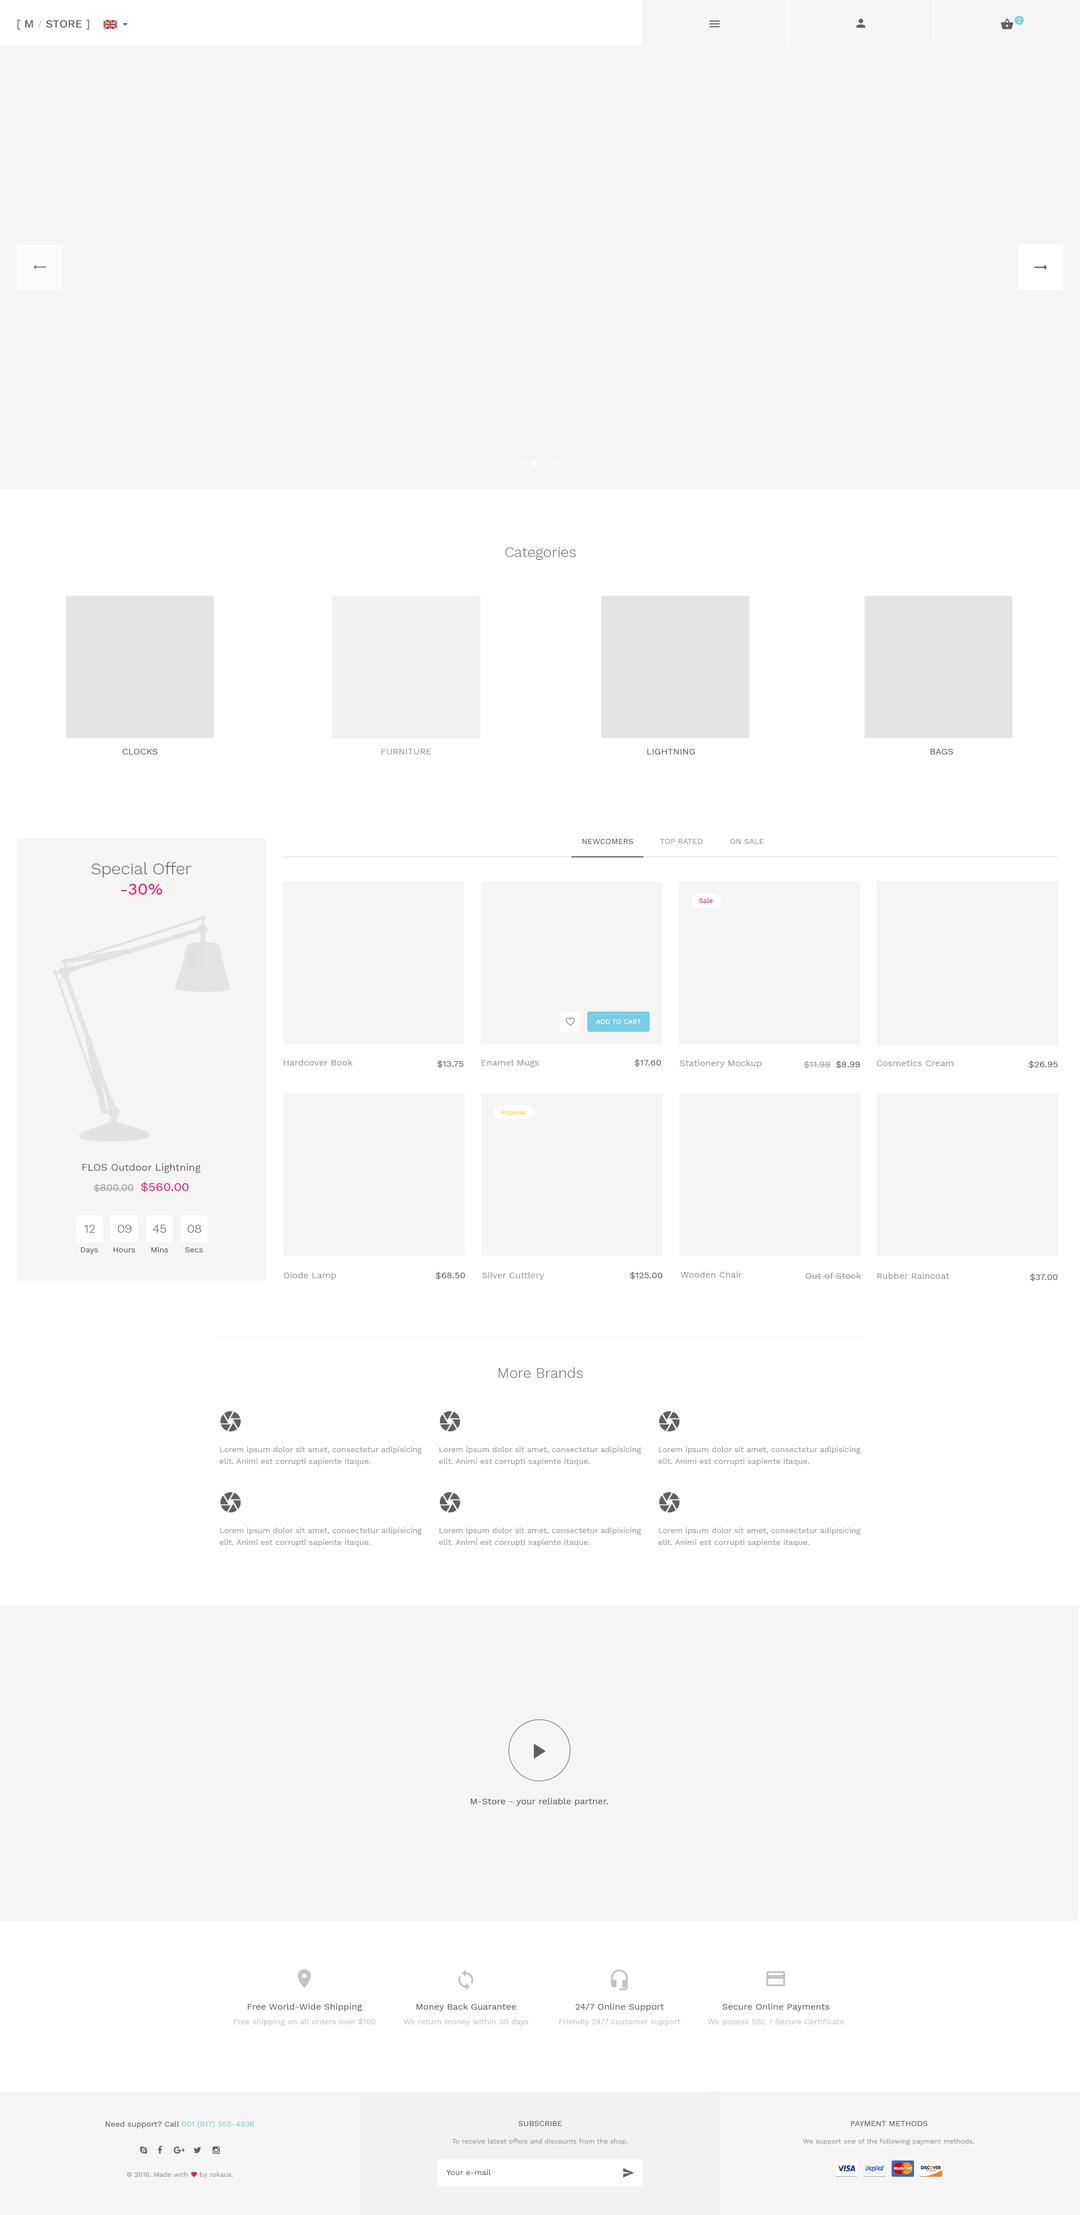
<style>
.page{position:relative;width:1080px;height:2215px;background:#f5f5f5}
.page>*{position:absolute;margin:0}
.t1{font:11.2px "WorkSans-Medium";color:#606060}
.t2{font:11.2px "WorkSans-Regular";color:#606060}
.t3{font:10.1px "WorkSans-Regular";color:#bababa}
.t4{font:6.8px "WorkSans-Regular";color:#fffefe}
.t5{font:14.6px "WorkSans-Light";color:#606060}
.t6{font:9px "WorkSans-Regular";color:#606060;text-transform:uppercase}
.t7{font:9px "WorkSans-Regular";color:#999999;text-transform:uppercase}
.t8{font:7.9px "WorkSans-Regular";color:#999999;text-transform:uppercase}
.t9{font:7.9px "WorkSans-Regular";color:#606060;text-transform:uppercase}
.t10{font:16.9px "WorkSans-Light";color:#606060}
.t11{font:16.9px "WorkSans-Regular";color:#ef0568}
.t12{font:6.8px "WorkSans-Regular";color:#ef0568}
.t13{font:6.8px "WorkSans-Regular";color:#ffffff;text-transform:uppercase}
.t14{font:9px "WorkSans-Regular";color:#999999}
.t15{font:9px "WorkSans-Regular";color:#606060}
.t16{font:6.8px "WorkSans-Regular";color:#ffce2b}
.t17{font:10.1px "WorkSans-Regular";color:#606060}
.t18{font:10.1px "WorkSans-Regular";color:#999999}
.t19{font:12.4px "WorkSans-Regular";color:#ef0568}
.t20{font:12.4px "WorkSans-Light";color:#606060}
.t21{font:7.9px "WorkSans-Regular";color:#606060}
.t22{font:7.9px/11.8px "WorkSans-Regular";color:#999999}
.t23{font:7.9px/14.6px "WorkSans-Regular";color:#c4c4c4}
.t24{font:9px/14.6px "WorkSans-Regular";color:#606060}
.t25{font:7.9px "WorkSans-Regular";color:#77cde3}
.t26{font:6.8px "WorkSans-Regular";color:#999999}
</style>
<div class="page">
<p class="t1" style="left:17px;top:20px;width:72px;height:10px"><span class="t2">[</span> M <span class="t3">/ </span>STORE <span class="t2">]</span></p>
<p class="t4" style="left:1018px;top:18px;width:3px;height:4px">2</p>
<p class="t5" style="left:505px;top:547px;width:71px;height:13px">Categories</p>
<p class="t6" style="left:123px;top:749px;width:35px;height:5px">Clocks</p>
<p class="t7" style="left:381px;top:749px;width:50px;height:5px">Furniture</p>
<p class="t6" style="left:647px;top:749px;width:48px;height:5px">Lightning</p>
<p class="t6" style="left:930px;top:749px;width:23px;height:5px">Bags</p>
<p class="t8" style="left:582px;top:839px;width:182px;height:5px"><span class="t9">Newcomers          </span>Top Rated          On Sale</p>
<p class="t10" style="left:91px;top:862px;width:100px;height:32px;text-align:center">Special Offer<br><span class="t11">-30%</span></p>
<p class="t12" style="left:699px;top:898px;width:14px;height:5px">Sale</p>
<p class="t13" style="left:596px;top:1019px;width:45px;height:5px">Add To Cart</p>
<p class="t14" style="left:284px;top:1059px;width:69px;height:6px">Hardcover Book</p>
<p class="t15" style="left:437px;top:1060px;width:27px;height:8px">$13.75</p>
<p class="t14" style="left:482px;top:1059px;width:57px;height:8px">Enamel Mugs</p>
<p class="t15" style="left:634px;top:1059px;width:27px;height:7px">$17.60</p>
<p class="t14" style="left:680px;top:1060px;width:82px;height:8px">Stationery Mockup</p>
<p class="t14" style="left:804px;top:1060px;width:27px;height:8px">$11.99</p>
<p class="t15" style="left:836px;top:1060px;width:24px;height:8px">$8.99</p>
<p class="t14" style="left:876px;top:1060px;width:77px;height:6px">Cosmetics Cream</p>
<p class="t15" style="left:1029px;top:1060px;width:29px;height:8px">$26.95</p>
<p class="t16" style="left:501px;top:1109px;width:25px;height:6px">Popular</p>
<p class="t17" style="left:82px;top:1163px;width:119px;height:10px">FLOS Outdoor Lightning</p>
<p class="t18" style="left:93px;top:1181px;width:96px;height:11px">$800.00  <span class="t19">$560.00</span></p>
<p class="t20" style="left:84px;top:1225px;width:11px;height:7px">12</p>
<p class="t20" style="left:118px;top:1225px;width:14px;height:7px">09</p>
<p class="t20" style="left:152px;top:1225px;width:14px;height:7px">45</p>
<p class="t20" style="left:187px;top:1225px;width:14px;height:7px">08</p>
<p class="t21" style="left:80px;top:1247px;width:18px;height:7px">Days</p>
<p class="t21" style="left:113px;top:1247px;width:22px;height:5px">Hours</p>
<p class="t21" style="left:151px;top:1246px;width:17px;height:6px">Mins</p>
<p class="t21" style="left:185px;top:1247px;width:18px;height:5px">Secs</p>
<p class="t14" style="left:284px;top:1272px;width:52px;height:8px">Diode Lamp</p>
<p class="t15" style="left:435px;top:1271px;width:30px;height:8px">$68.50</p>
<p class="t14" style="left:482px;top:1272px;width:62px;height:8px">Silver Cuttlery</p>
<p class="t15" style="left:630px;top:1271px;width:33px;height:8px">$125.00</p>
<p class="t14" style="left:681px;top:1271px;width:61px;height:6px">Wooden Chair</p>
<p class="t14" style="left:805px;top:1272px;width:56px;height:7px">Out of Stock</p>
<p class="t14" style="left:877px;top:1272px;width:73px;height:7px">Rubber Raincoat</p>
<p class="t15" style="left:1030px;top:1273px;width:28px;height:8px">$37.00</p>
<p class="t5" style="left:498px;top:1367px;width:85px;height:11px">More Brands</p>
<p class="t22" style="left:219px;top:1446px;width:203px;height:19px">Lorem ipsum dolor sit amet, consectetur adipisicing elit. Animi est corrupti sapiente itaque.</p>
<p class="t22" style="left:439px;top:1446px;width:202px;height:19px">Lorem ipsum dolor sit amet, consectetur adipisicing elit. Animi est corrupti sapiente itaque.</p>
<p class="t22" style="left:658px;top:1446px;width:203px;height:19px">Lorem ipsum dolor sit amet, consectetur adipisicing elit. Animi est corrupti sapiente itaque.</p>
<p class="t22" style="left:219px;top:1527px;width:203px;height:19px">Lorem ipsum dolor sit amet, consectetur adipisicing elit. Animi est corrupti sapiente itaque.</p>
<p class="t22" style="left:439px;top:1527px;width:202px;height:19px">Lorem ipsum dolor sit amet, consectetur adipisicing elit. Animi est corrupti sapiente itaque.</p>
<p class="t22" style="left:658px;top:1527px;width:203px;height:19px">Lorem ipsum dolor sit amet, consectetur adipisicing elit. Animi est corrupti sapiente itaque.</p>
<p class="t15" style="left:470px;top:1798px;width:138px;height:8px">M-Store - your reliable partner.</p>
<p class="t23" style="left:233px;top:2003px;width:143px;height:23px;text-align:center"><span class="t24">Free World-Wide Shipping<br></span>Free shipping on all orders over $100</p>
<p class="t23" style="left:403px;top:2003px;width:126px;height:23px;text-align:center"><span class="t24">Money Back Guarantee<br></span>We return money within 30 days</p>
<p class="t23" style="left:559px;top:2003px;width:122px;height:23px;text-align:center"><span class="t24">24/7 Online Support<br></span>Friendly 24/7 customer support</p>
<p class="t23" style="left:708px;top:2003px;width:136px;height:23px;text-align:center"><span class="t24">Secure Online Payments<br></span>We posess SSL / Secure Certificate</p>
<p class="t21" style="left:105px;top:2120px;width:149px;height:8px">Need support? Call <span class="t25">001 (917) 555-4836</span></p>
<p class="t9" style="left:518px;top:2121px;width:44px;height:5px">Subscribe</p>
<p class="t9" style="left:851px;top:2121px;width:77px;height:5px">Payment Methods</p>
<p class="t26" style="left:452px;top:2138px;width:176px;height:6px">To receive latest offers and discounts from the shop.</p>
<p class="t26" style="left:803px;top:2138px;width:171px;height:6px">We support one of the following payment methods.</p>
<p class="t26" style="left:127px;top:2171px;width:106px;height:6px">© 2016. Made with     by rokaux.</p>
<p class="t21" style="left:446px;top:2169px;width:45px;height:6px">Your e-mail</p>
</div>
